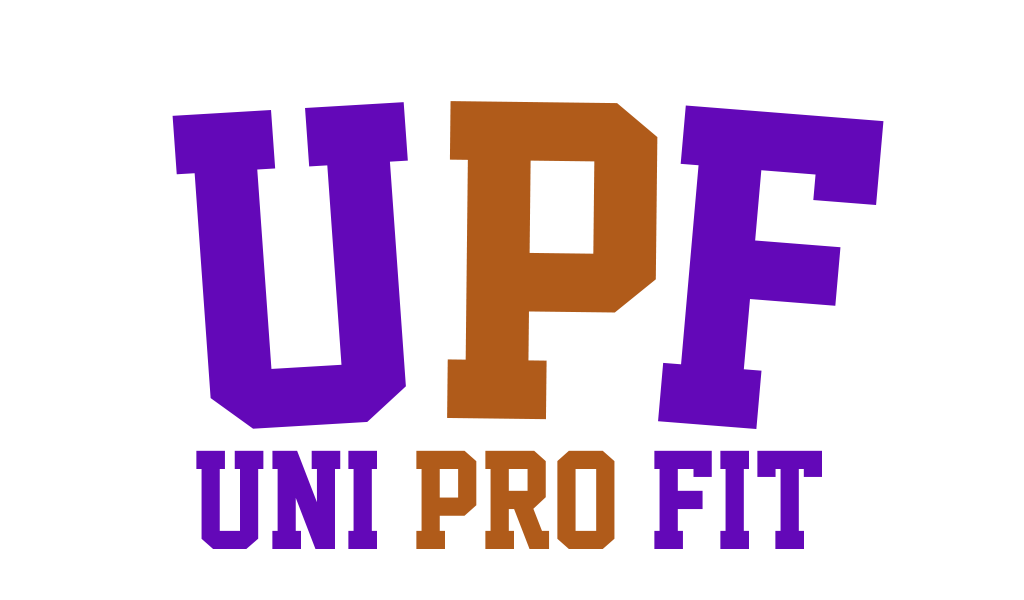
<style>
.page{position:relative;width:1024px;height:600px;background:#ffffff}
.page>*{position:absolute;margin:0}
.t1{font:413.1px "SuperstarM54";color:#6308b8;scale:1.07 1}
.t2{font:413.1px "SuperstarM54";color:#b05b1a;scale:1.07 1}
.t3{font:127.7px "SuperstarM54";color:#6308b8}
.t4{font:127.7px "SuperstarM54";color:#b05b1a}
</style>
<div class="page">
<p class="t1" style="left:172px;top:101px;width:712px;height:328px;rotate:1deg"><span class="t2">               </span>u<span class="t2">p</span>f</p>
<p class="t3" style="left:196px;top:450px;width:626px;height:99px">uni <span class="t4">pro</span> fit</p>
</div>
